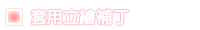
<style>
.page{position:relative;width:200px;height:30px;background:#ffffff}
.page>*{position:absolute;margin:0}
.t1{font:16px "AdobeFanHeitiStd-Bold";color:#fffefe;font-weight:bold}
</style>
<div class="page">
<p class="t1" style="left:31px;top:9px;width:98px;height:17px">套用立繪補丁</p>
</div>
